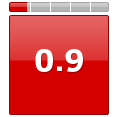
<style>
.page{position:relative;width:117px;height:117px;background:#d40000}
.page>*{position:absolute;margin:0}
.t1{font:36px "Colaborate-Bold";color:#ffffff;text-transform:uppercase}
</style>
<div class="page">
<p class="t1" style="left:35px;top:49px;width:48px;height:23px">0.9</p>
</div>
